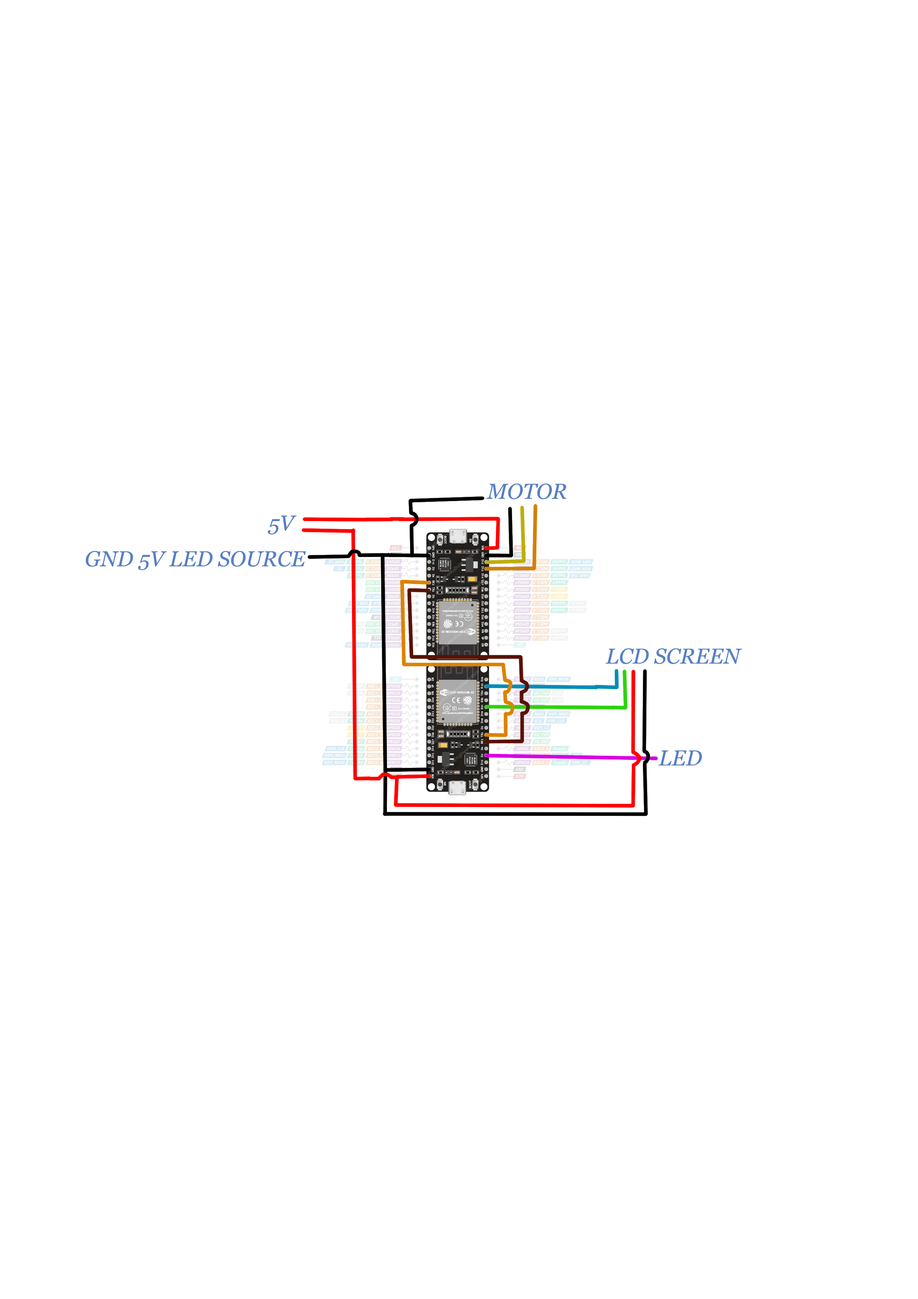
<style>
.page{position:relative;width:918px;height:1299px;background:#ffffff}
.page>*{position:absolute;margin:0}
.t1{font:21.6px "Georgia-Italic";color:#577fc4}
</style>
<div class="page">
<p class="t1" style="left:486px;top:483px;width:81px;height:16px">MOTOR</p>
<p class="t1" style="left:268px;top:515px;width:29px;height:20px">5V</p>
<p class="t1" style="left:86px;top:551px;width:220px;height:19px">GND 5V LED SOURCE</p>
<p class="t1" style="left:606px;top:648px;width:136px;height:16px">LCD SCREEN</p>
<p class="t1" style="left:658px;top:750px;width:44px;height:16px">LED</p>
</div>
